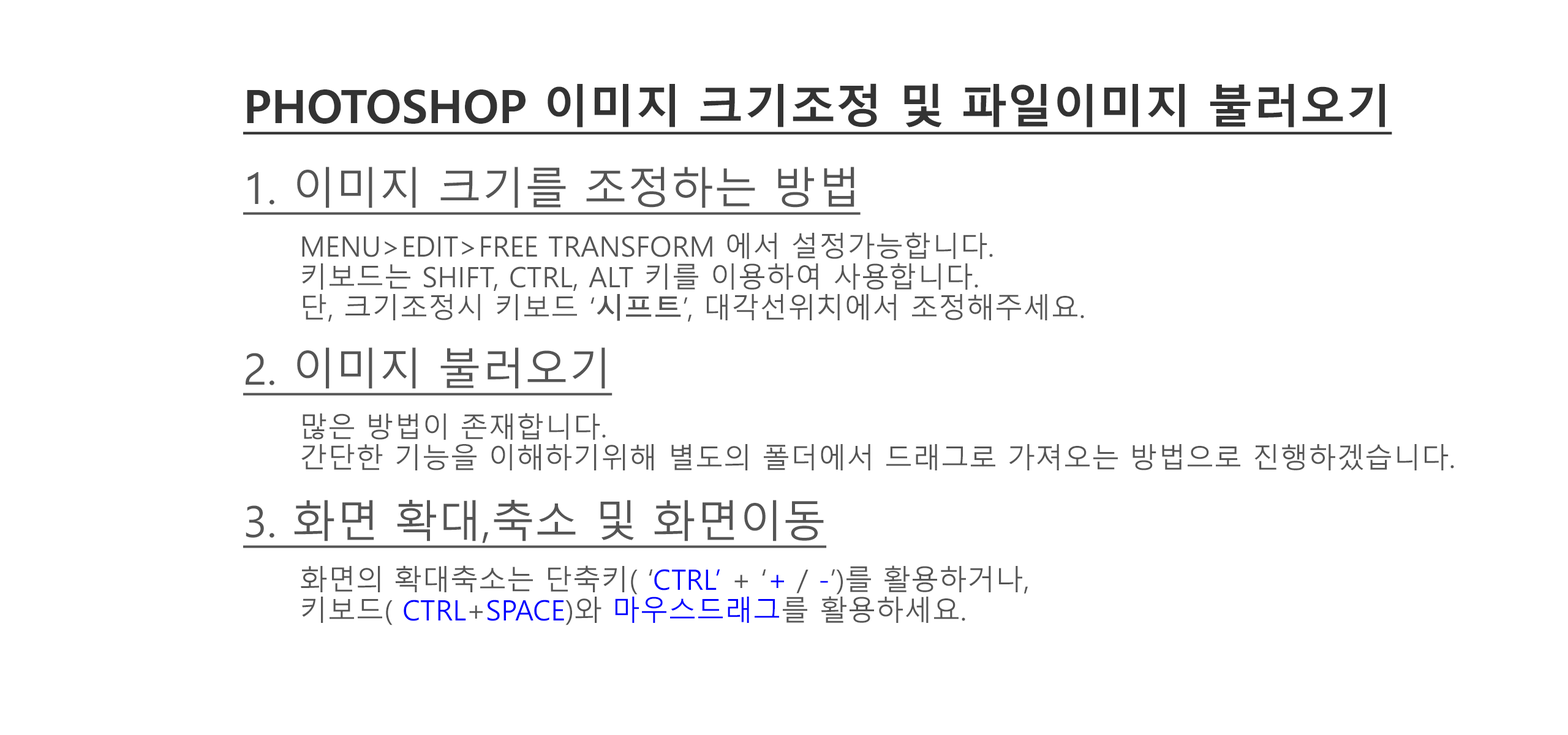
<style>
.page{position:relative;width:1568px;height:735px;background:#ffffff}
.page>*{position:absolute;margin:0}
.t1{font:45.9px "MalgunGothicBold";color:#333333;text-transform:uppercase;text-decoration:underline}
.t2{font:43.4px "MalgunGothic";color:#555555;text-transform:uppercase;text-decoration:underline}
.t3{font:28.1px/30.6px "MalgunGothic";color:#555555;text-transform:uppercase}
.t4{font:28.1px/30.6px "MalgunGothic";color:#555555;text-transform:uppercase;font-weight:bold}
.t5{font:28.1px/30.6px "MalgunGothic";color:#0000ff;text-transform:uppercase}
</style>
<div class="page">
<p class="t1" style="left:243px;top:83px;width:1149px;height:52px">Photoshop 이미지 크기조정 및 파일이미지 불러오기</p>
<p class="t2" style="left:243px;top:167px;width:618px;height:48px">1. 이미지 크기를 조정하는 방법</p>
<p class="t3" style="left:302px;top:232px;width:782px;height:90px">MENU&gt;EDIT&gt;FREE TRANSFORM 에서 설정가능합니다.<br>키보드는 shift, ctrl, alt 키를 이용하여 사용합니다.<br>단, 크기조정시 키보드 ‘<span class="t4">시프트</span>’, 대각선위치에서 조정해주세요.</p>
<p class="t2" style="left:243px;top:347px;width:369px;height:49px">2. 이미지 불러오기</p>
<p class="t3" style="left:301px;top:413px;width:1153px;height:57px">많은 방법이 존재합니다.<br>간단한 기능을 이해하기위해 별도의 폴더에서 드래그로 가져오는 방법으로 진행하겠습니다.</p>
<p class="t2" style="left:243px;top:500px;width:584px;height:48px">3. 화면 확대,축소 및 화면이동</p>
<p class="t3" style="left:301px;top:565px;width:727px;height:60px">화면의 확대축소는 단축키( ‘<span class="t5">ctrl’</span> + ‘<span class="t5">+</span> / <span class="t5">-</span>’)를 활용하거나, <br>키보드( <span class="t5">ctrl</span>+<span class="t5">space</span>)와 <span class="t5">마우스드래그</span>를 활용하세요.</p>
</div>
